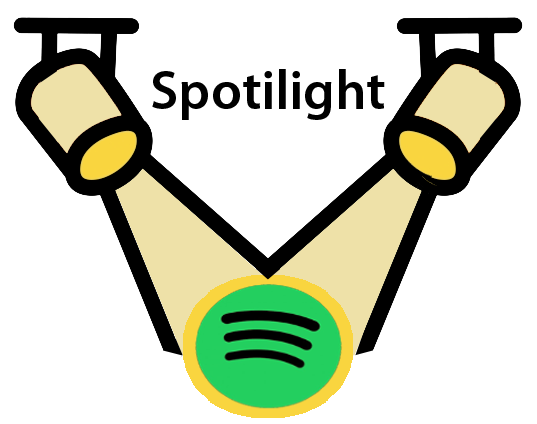
<style>
.page{position:relative;width:537px;height:424px;background:#ffffff}
.page>*{position:absolute;margin:0}
.t1{font:55px "MyriadPro-Semibold";color:#000000}
</style>
<div class="page">
<p class="t1" style="left:152px;top:69px;width:233px;height:51px">Spotilight</p>
</div>
